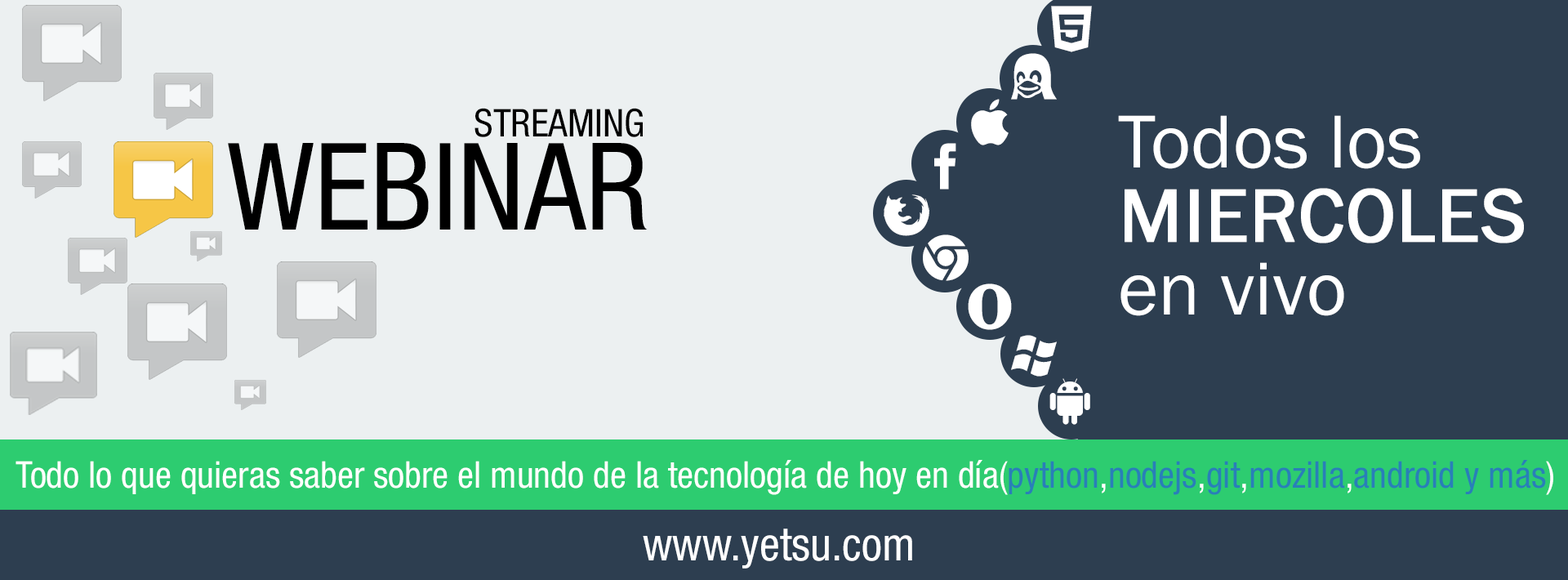
<style>
.page{position:relative;width:1568px;height:580px;background:#ecf0f1}
.page>*{position:absolute;margin:0}
.t1{font:38.4px "HelveticaNeueLTStd-Cn";color:#000000}
.t2{font:77.6px/24.5px "FranklinGothic-Book";color:#ffffff}
.t3{font:77.6px/24.5px "FranklinGothic-Book";color:#ffffff;font-weight:bold}
.t4{font:120.9px "HelveticaNeueLTStd-Cn";color:#000000}
.t5{font:36.8px "HelveticaNeueLTStd-Cn";color:#ffffff}
.t6{font:36.8px "HelveticaNeueLTStd-Cn";color:#297fb8}
.t7{font:45.7px "HelveticaNeueLTStd-Cn";color:#ffffff}
</style>
<div class="page">
<p class="t1" style="left:474px;top:108px;width:169px;height:29px">STREAMING</p>
<p class="t2" style="left:1118px;top:115px;width:406px;height:201px">Todos los <br><br><span class="t3"><br>MIERCOLES <br></span><br><br>en vivo</p>
<p class="t4" style="left:228px;top:143px;width:420px;height:87px">WEBINAR</p>
<p class="t5" style="left:16px;top:460px;width:1537px;height:35px">Todo lo que quieras saber sobre el mundo de la tecnología de hoy en día(<span class="t6">python</span>,<span class="t6">nodejs</span>,<span class="t6">git</span>,<span class="t6">mozilla</span>,<span class="t6">android y más</span>)</p>
<p class="t7" style="left:643px;top:528px;width:269px;height:40px">www.yetsu.com</p>
</div>
